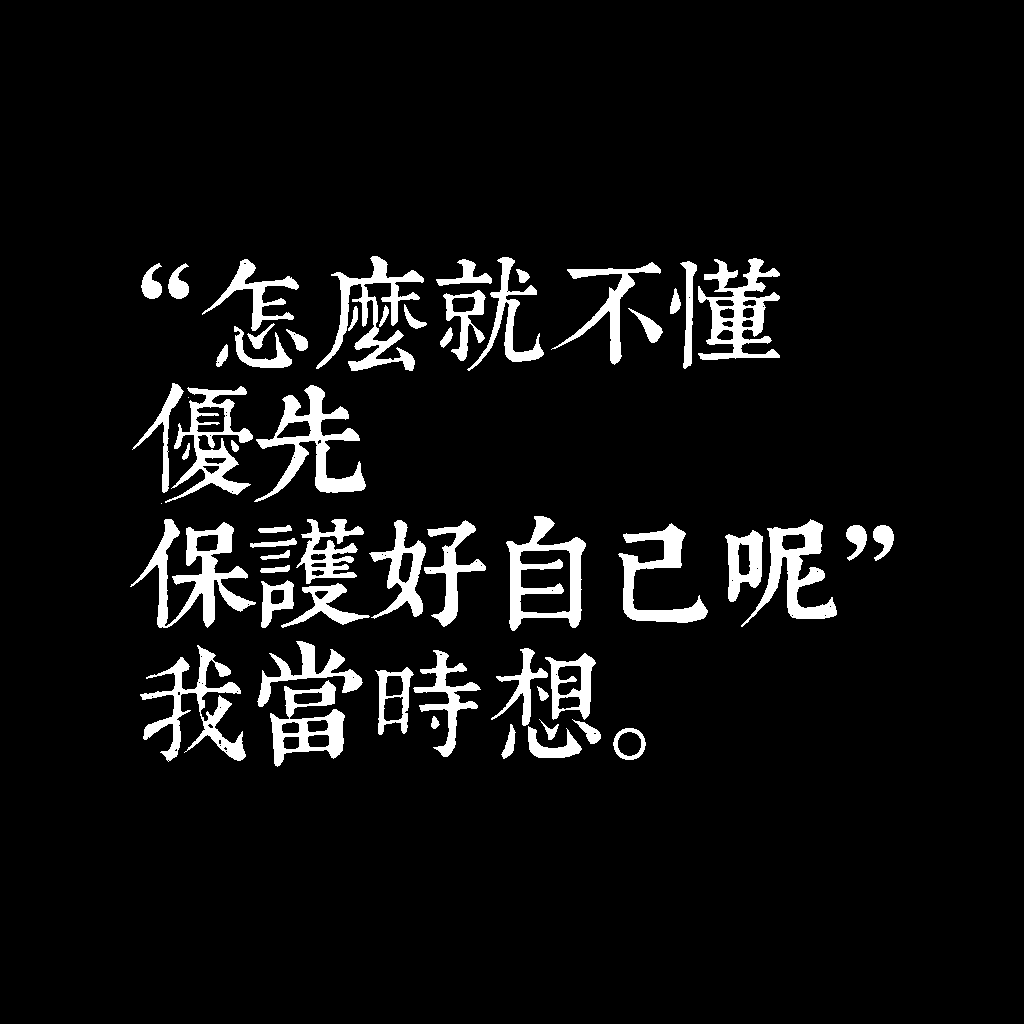
<style>
.page{position:relative;width:1024px;height:1024px;background:#000000}
.page>*{position:absolute;margin:0}
.t1{font:120px/130px "TpldKhangXiDictTrial";letter-spacing:-0.02em;color:#ffffff}
</style>
<div class="page">
<p class="t1" style="left:130px;top:256px;width:764px;height:511px">“怎麼就不懂<br>優先<br>保護好自己呢”<br>我當時想。</p>
</div>
